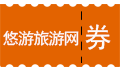
<style>
.page{position:relative;width:120px;height:70px;background:#e36300}
.page>*{position:absolute;margin:0}
.t1{font:16px "SimHei";letter-spacing:-0.045em;color:#fcfaf8}
.t2{font:27.4px "SimHei";color:#fcfaf8}
</style>
<div class="page">
<p class="t1" style="left:3px;top:30px;width:76px;height:16px">悠游旅游网</p>
<p class="t2" style="left:85px;top:24px;width:26px;height:26px">券</p>
</div>
